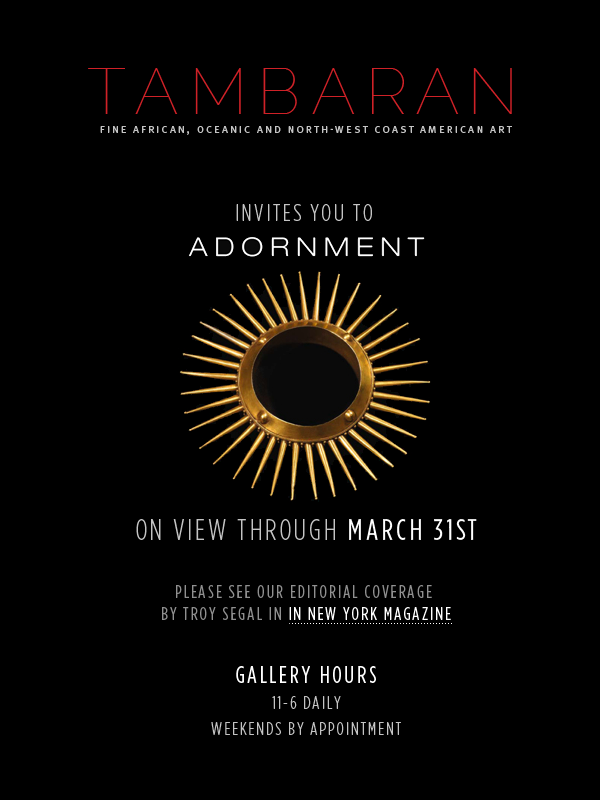
<style>
.page{position:relative;width:600px;height:800px;background:#000000}
.page>*{position:absolute;margin:0}
.t1{font:64.8px "Raleway-Thin";letter-spacing:0.23em;color:#cf2127}
.t2{font:10.2px "MetaPro-Book";letter-spacing:0.23em;color:#c4c4c4;text-transform:uppercase}
.t3{font:24px "GothamHTF-LightCondensed";letter-spacing:0.11em;color:#c4c4c4;text-transform:uppercase}
.t4{font:18px/22px "GothamHTF-BookCondensed";letter-spacing:0.11em;color:#909090;text-transform:uppercase}
.t5{font:30px/28px "GothamHTF-LightCondensed";letter-spacing:0.11em;color:#c4c4c4;text-transform:uppercase}
.t6{font:30px/28px "GothamHTF-BookCondensed";letter-spacing:0.11em;color:#ffffff;text-transform:uppercase}
.t7{font:18px/22px "GothamHTF-BookCondensed";letter-spacing:0.11em;color:#ffffff;text-transform:uppercase}
.t8{font:18px/26px "GothamHTF-LightCondensed";letter-spacing:0.11em;color:#c4c4c4;text-transform:uppercase}
.t9{font:24px/26px "GothamHTF-BookCondensed";letter-spacing:0.11em;color:#ffffff;text-transform:uppercase}
</style>
<div class="page">
<p class="t1" style="left:88px;top:68px;width:424px;height:46px">TAMBARAN</p>
<p class="t2" style="left:100px;top:126px;width:412px;height:9px">Fine African, Oceanic and North-West Coast American Art</p>
<p class="t3" style="left:236px;top:204px;width:136px;height:17px">Invites you to</p>
<p class="t4" style="left:136px;top:519px;width:341px;height:101px;text-align:center"><span class="t5">on view through </span><span class="t6">March 31st<br><br></span>Please see our editorial coverage <br>by Troy Segal in <span class="t7">IN New York Magazine</span></p>
<p class="t8" style="left:211px;top:666px;width:190px;height:69px;text-align:center"><span class="t9">Gallery hours<br></span>11-6 daily<br>Weekends by appointment</p>
</div>
